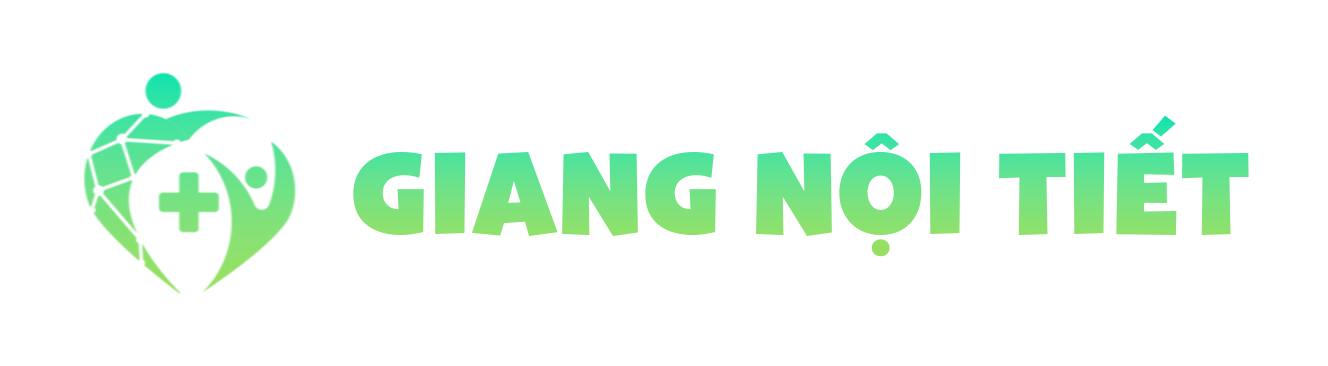
<style>
.page{position:relative;width:1328px;height:366px;background:#ffffff}
.page>*{position:absolute;margin:0}
.t1{font:116px "HY-Bango"}
</style>
<div class="page">
<p class="t1" style="left:353px;top:115px;width:896px;height:142px">GIANG Nội Tiết</p>
</div>
